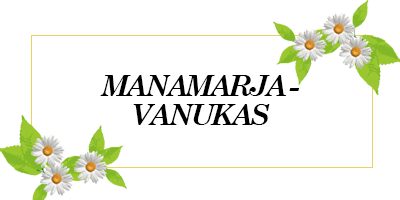
<style>
.page{position:relative;width:400px;height:200px;background:#ffffff}
.page>*{position:absolute;margin:0}
.t1{font:29.2px/29.2px "CenturySchoolbook-BoldItalic";letter-spacing:-0.1em;color:#000000}
</style>
<div class="page">
<p class="t1" style="left:100px;top:75px;width:199px;height:50px;text-align:center">MANAMARJA -<br>VANUKAS</p>
</div>
